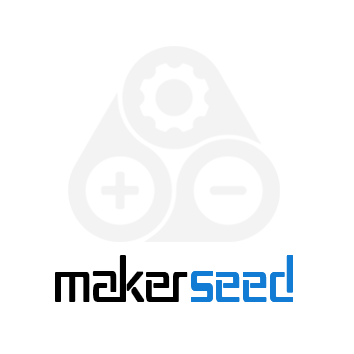
<style>
.page{position:relative;width:354px;height:354px;background:#ffffff}
.page>*{position:absolute;margin:0}
.t1{font:53.1px "RepublikaII";font-weight:bold;scale:0.73 1}
.t2{font:53.1px "RepublikaII";color:#000000;font-weight:bold;scale:0.73 1}
.t3{font:53.1px "RepublikaII";color:#127bd4;font-weight:bold;scale:0.73 1}
</style>
<div class="page">
<p class="t1" style="left:55px;top:255px;width:238px;height:47px">MAKERSEED</p>
<p class="t2" style="left:55px;top:255px;width:238px;height:47px">MAKER<span class="t3">SEED</span></p>
</div>
